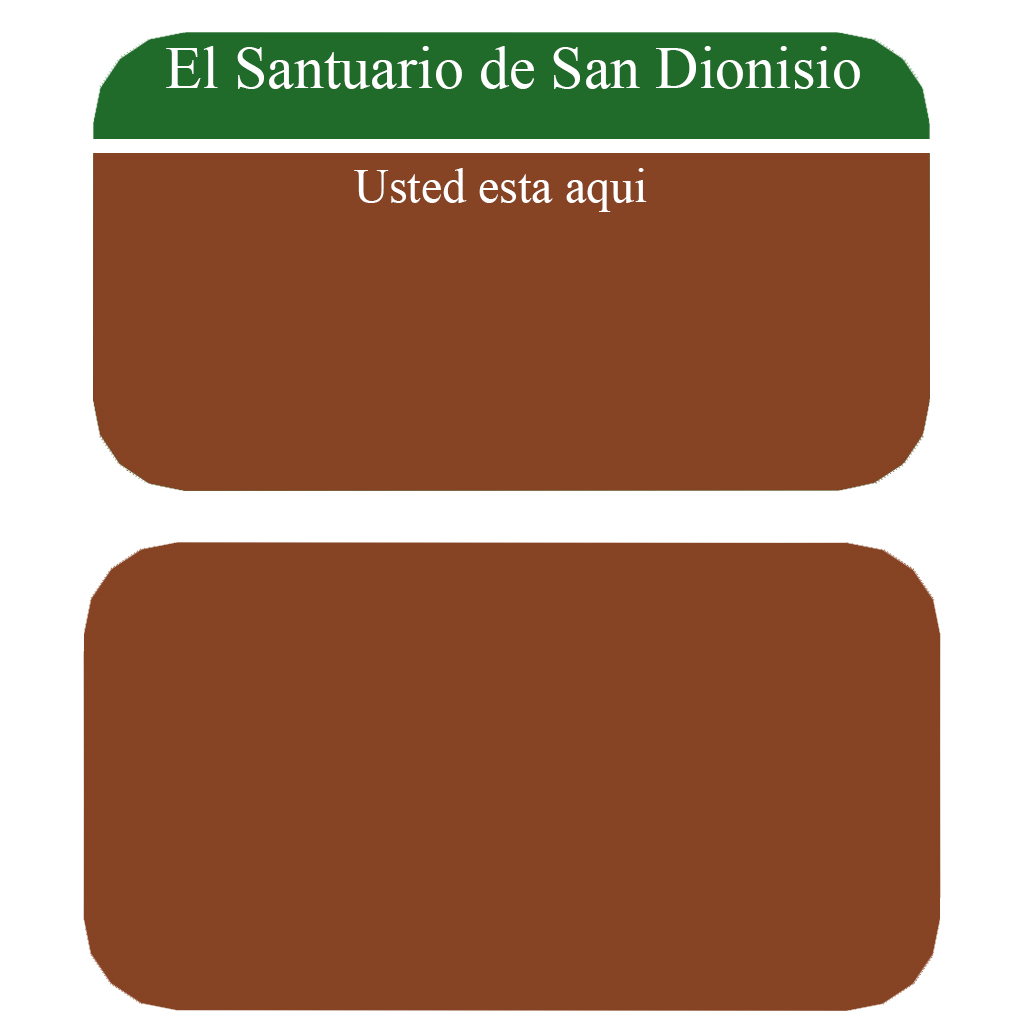
<style>
.page{position:relative;width:1024px;height:1024px;background:#864424}
.page>*{position:absolute;margin:0}
.t1{font:60px "TimesNewRomanPSMT";color:#ffffff}
.t2{font:48px "TimesNewRomanPSMT";color:#ffffff}
</style>
<div class="page">
<p class="t1" style="left:166px;top:46px;width:694px;height:43px">El Santuario de San Dionisio</p>
<p class="t2" style="left:354px;top:168px;width:293px;height:44px">Usted esta aqui</p>
</div>
